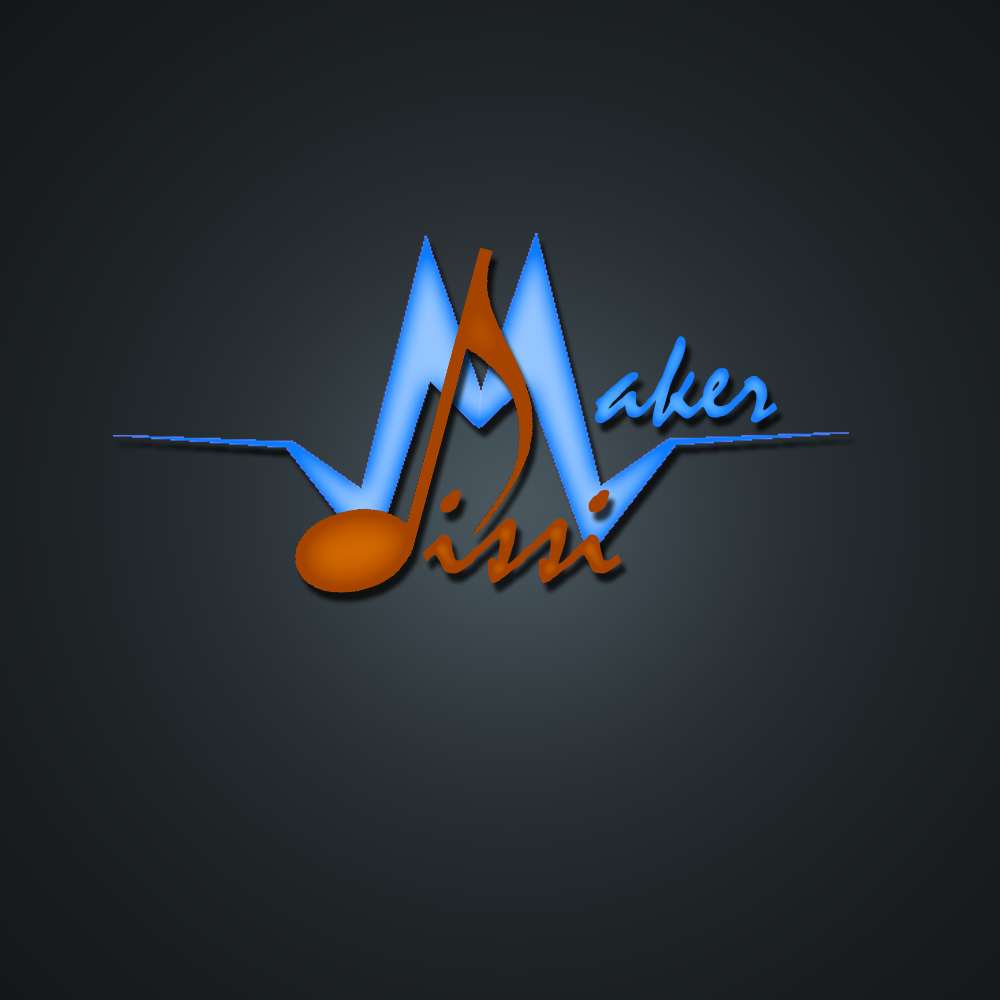
<style>
.page{position:relative;width:1000px;height:1000px}
.page>*{position:absolute;margin:0}
.t1{font:134.8px "Mistral"}
.t2{font:166.1px "Mistral";color:#a54200}
</style>
<div class="page">
<p class="t1" style="left:595px;top:336px;width:183px;height:91px">aker</p>
<p class="t2" style="left:423px;top:490px;width:199px;height:94px">issi</p>
</div>
